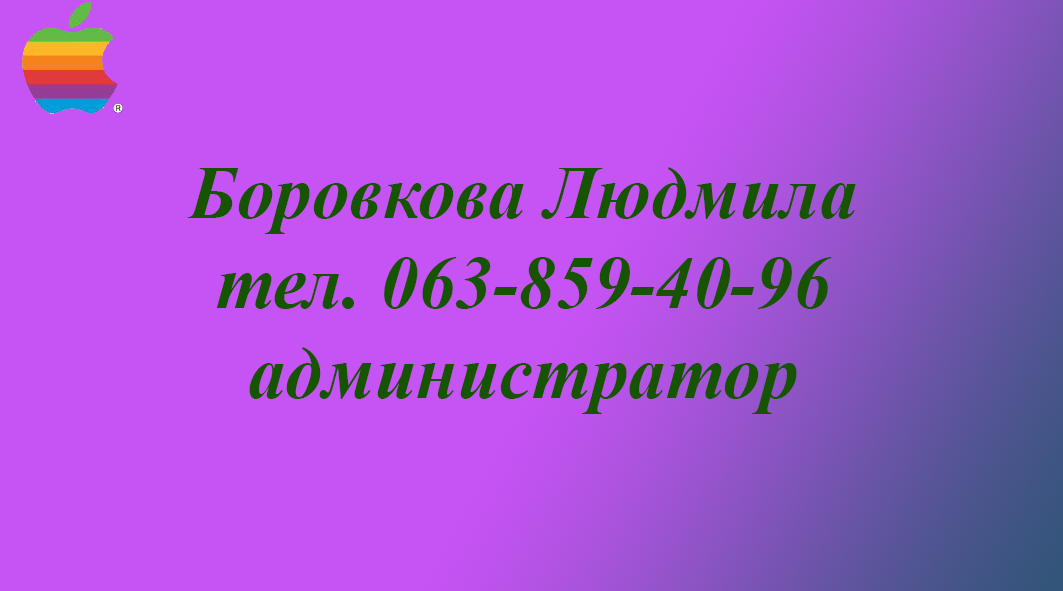
<style>
.page{position:relative;width:1063px;height:591px;background:#c653f4}
.page>*{position:absolute;margin:0}
.t1{font:75px "TimesNewRomanPS-BoldItalicMT";color:#175400}
</style>
<div class="page">
<p class="t1" style="left:187px;top:167px;width:669px;height:247px;text-align:center">Боровкова Людмила<br>тел. 063-859-40-96<br>администратор</p>
</div>
